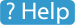
<style>
.page{position:relative;width:75px;height:25px;background:#3399cc}
.page>*{position:absolute;margin:0}
.t1{font:24px "MyriadWebPro";color:#ffffff}
</style>
<div class="page">
<p class="t1" style="left:6px;top:2px;width:63px;height:22px">? Help</p>
</div>
